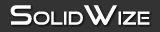
<style>
.page{position:relative;width:160px;height:32px;background:#333333}
.page>*{position:absolute;margin:0}
.t1{font:18px "GoodTimesRg-Regular";color:#ffffff}
.t2{font:26.7px "GoodTimesRg-Regular";color:#fefefe}
.t3{font:26.7px "GoodTimesRg-Regular";color:#ffffff}
</style>
<div class="page">
<p class="t1" style="left:10px;top:5px;width:140px;height:20px"><span class="t2">S</span>olid<span class="t3">W</span>ize</p>
</div>
